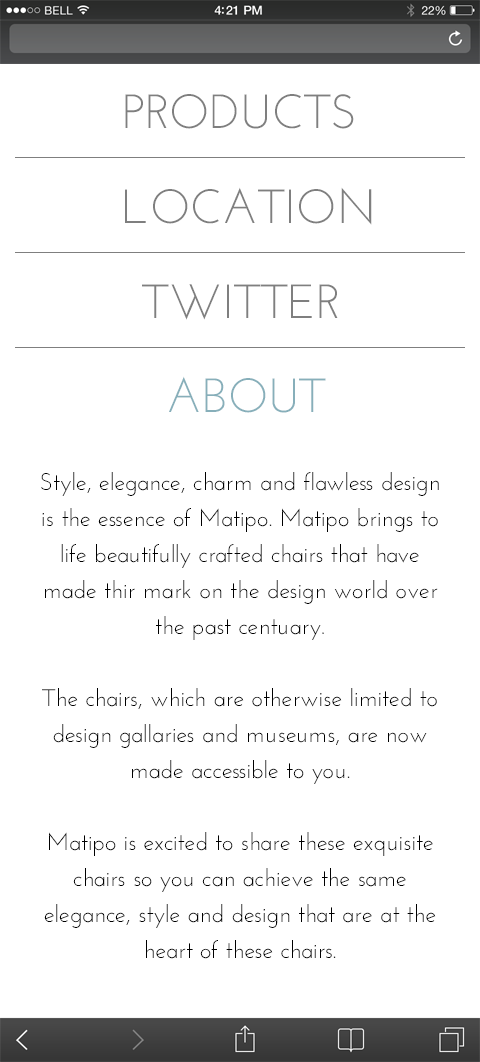
<style>
.page{position:relative;width:480px;height:1062px;background:#ffffff}
.page>*{position:absolute;margin:0}
.t1{font:48px "JosefinSans";color:#7f7f7f}
.t2{font:48px "JosefinSans";color:#87afba}
.t3{font:24px/36px "JosefinSans";color:#000000}
</style>
<div class="page">
<p class="t1" style="left:125px;top:94px;width:229px;height:35px">PRODUCTS</p>
<p class="t1" style="left:125px;top:187px;width:247px;height:38px">LOCATION</p>
<p class="t1" style="left:142px;top:284px;width:196px;height:36px">TWITTER</p>
<p class="t2" style="left:169px;top:376px;width:157px;height:37px">ABOUT</p>
<p class="t3" style="left:41px;top:472px;width:398px;height:487px;text-align:center">Style, elegance, charm and flawless design is the essence of Matipo. Matipo brings to life beautifully crafted chairs that have made thir mark on the design world over the past centuary.  <br><br>The chairs, which are otherwise limited to design gallaries and museums, are now made accessible to you. <br><br>Matipo is excited to share these exquisite chairs so you can achieve the same elegance, style and design that are at the heart of these chairs.</p>
</div>
